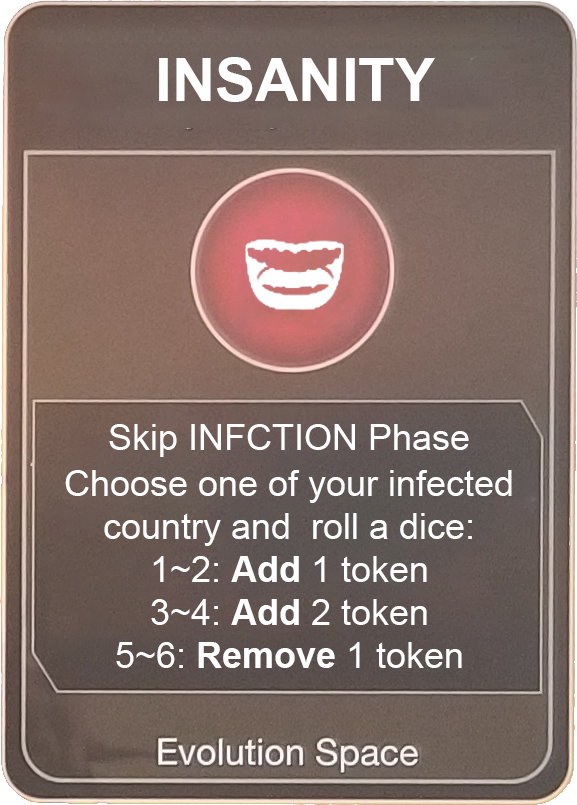
<style>
.page{position:relative;width:577px;height:805px}
.page>*{position:absolute;margin:0}
.t1{font:60px "Arial-BoldMT";color:#ffffff}
.t2{font:36px "ArialMT";color:#ffffff}
.t3{font:36px "Arial-BoldMT";color:#ffffff}
</style>
<div class="page">
<p class="t1" style="left:159px;top:57px;width:276px;height:45px">INSANITY</p>
<p class="t2" style="left:109px;top:424px;width:360px;height:33px">Skip INFCTION Phase</p>
<p class="t2" style="left:65px;top:470px;width:447px;height:198px;text-align:center">Choose one of your infected country and  roll a dice:<br>1~2: <span class="t3">Add</span> 1 token<br>3~4: <span class="t3">Add</span> 2 token<br>5~6: <span class="t3">Remove</span> 1 token</p>
</div>
